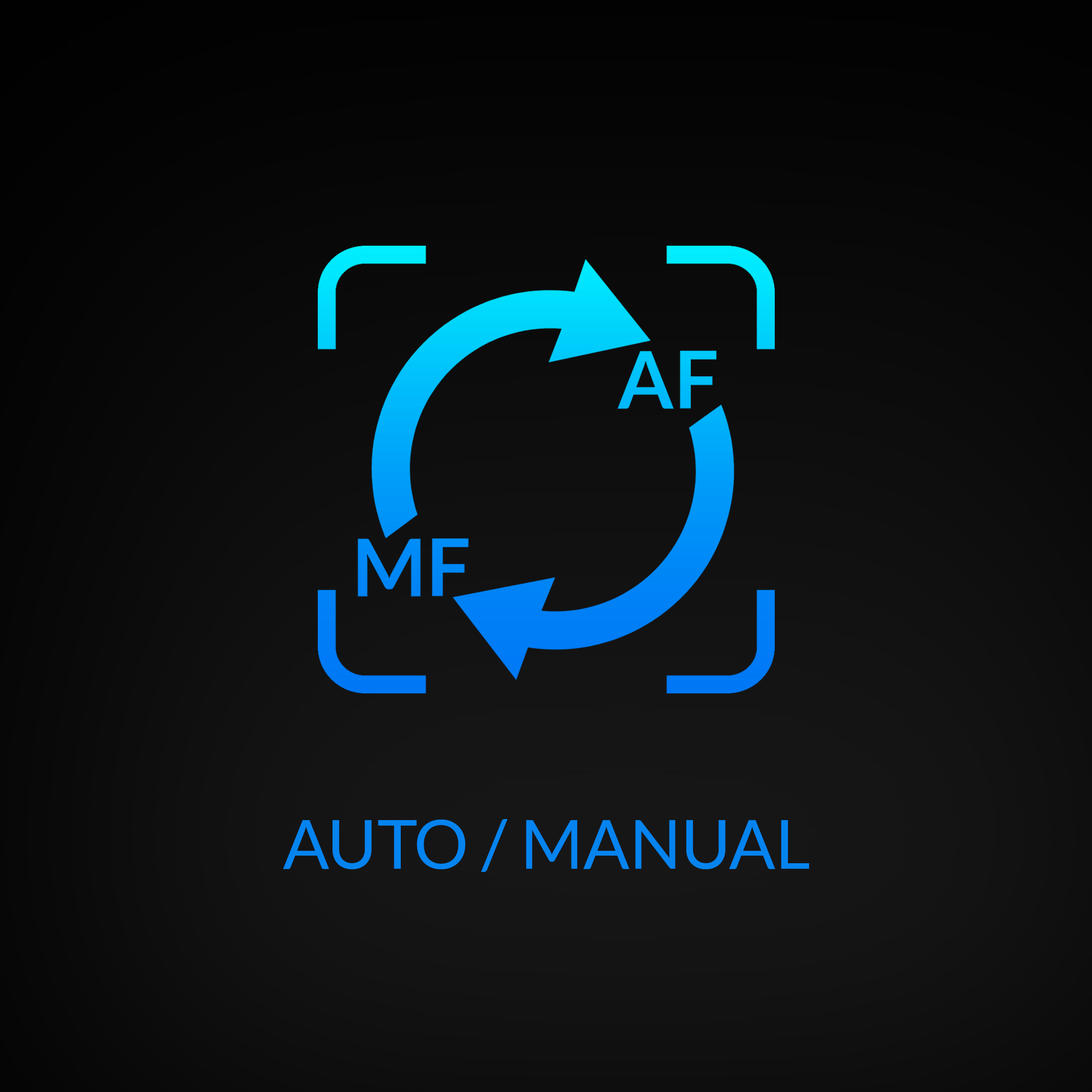
<style>
.page{position:relative;width:1092px;height:1092px}
.page>*{position:absolute;margin:0}
.t1{font:68.2px "Lato-Regular";color:#0584f0}
</style>
<div class="page">
<p class="t1" style="left:283px;top:819px;width:526px;height:53px">AUTO / MANUAL</p>
</div>
